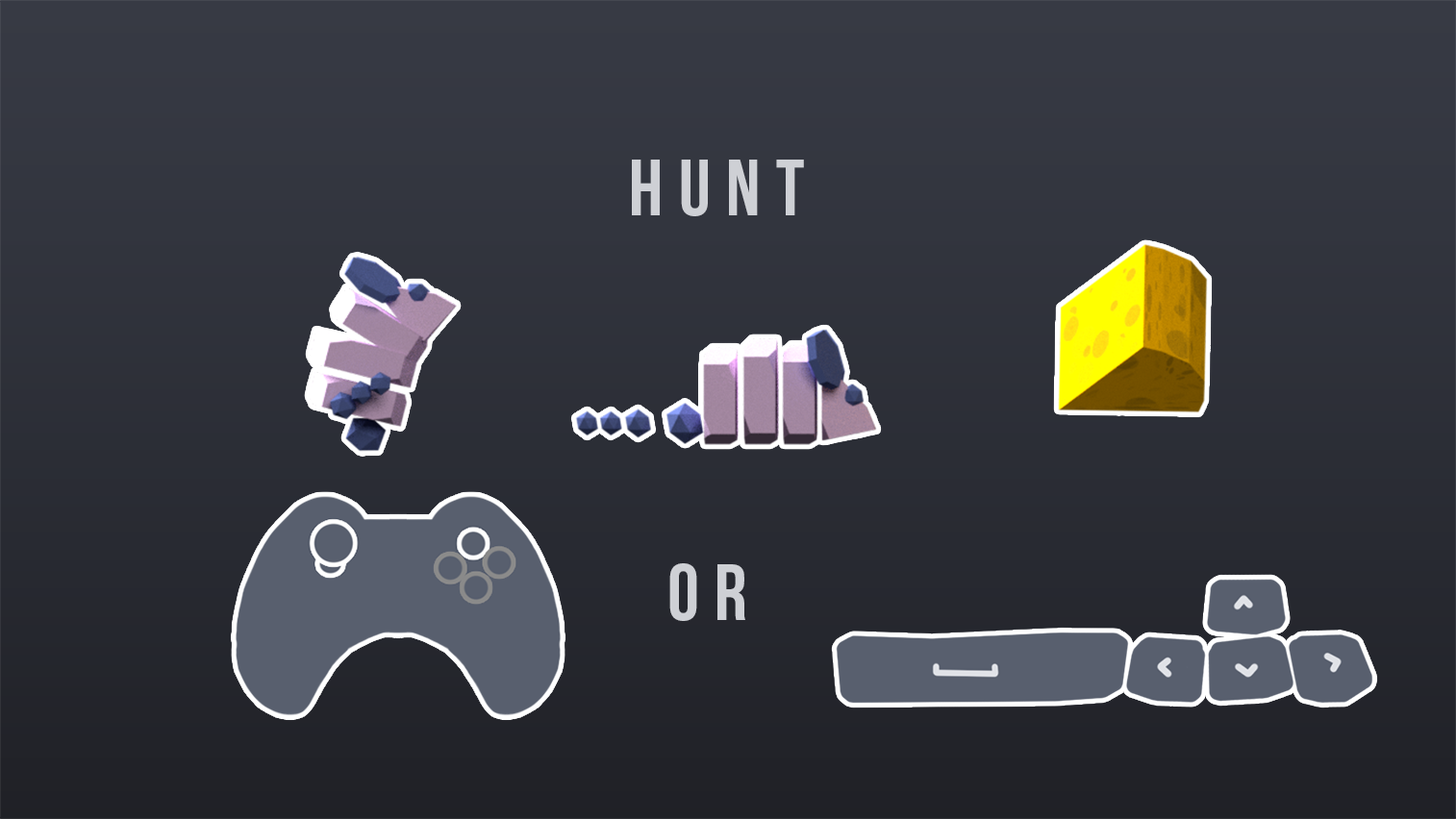
<style>
.page{position:relative;width:1456px;height:819px}
.page>*{position:absolute;margin:0}
.t1{font:79.8px "BebasNeueBold";letter-spacing:0.2em;color:#ced0d5}
</style>
<div class="page">
<p class="t1" style="left:632px;top:160px;width:172px;height:56px">Hunt</p>
<p class="t1" style="left:669px;top:563px;width:76px;height:58px">OR</p>
</div>
